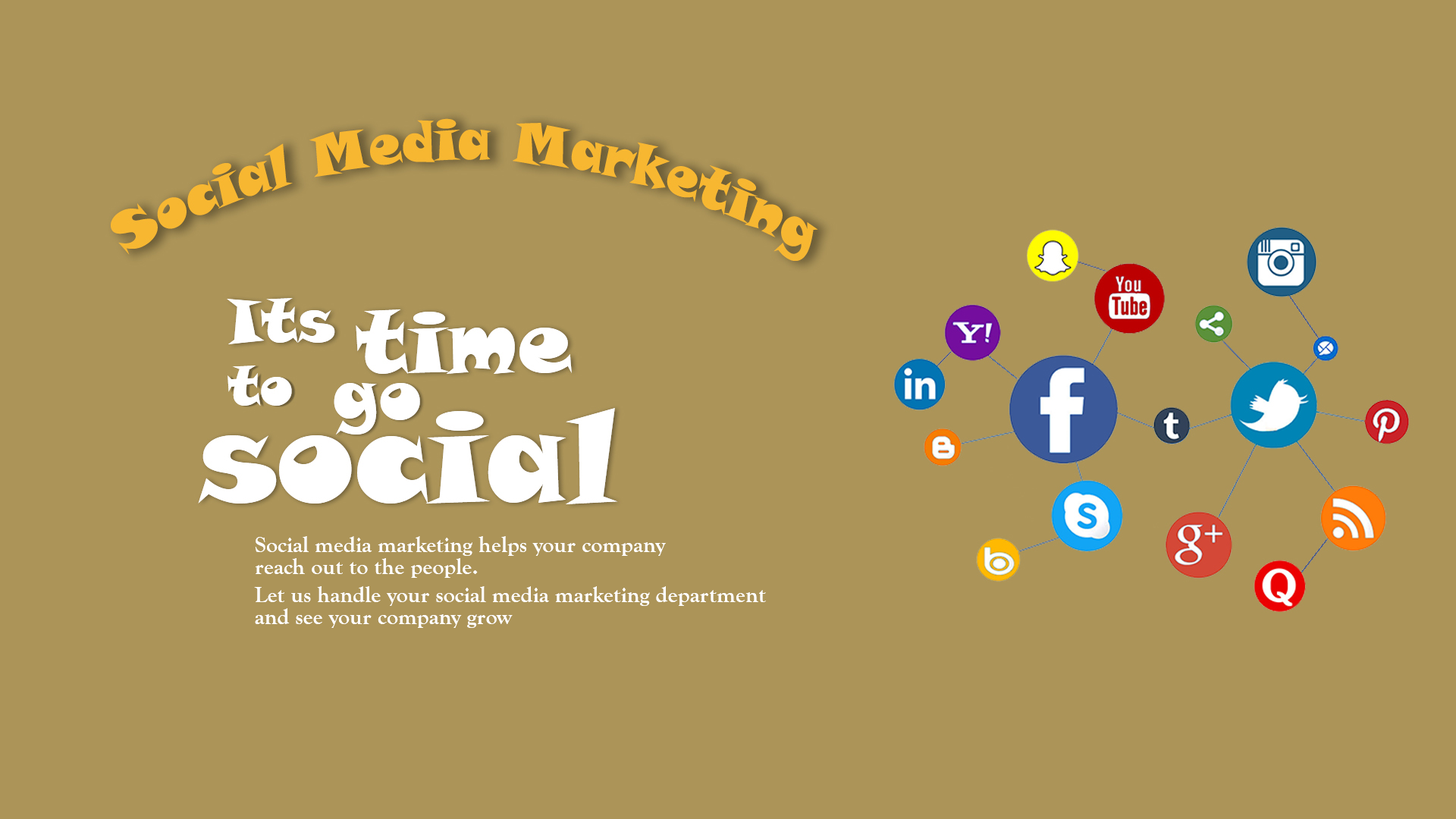
<style>
.page{position:relative;width:1456px;height:819px;background:#ac9458}
.page>*{position:absolute;margin:0}
.t1{font:22.7px/22px "GoudyOldStyleT-Bold";color:#ffffff}
</style>
<div class="page">
<p class="t1" style="left:255px;top:536px;width:411px;height:42px">Social media marketing helps your company <br>reach out to the people.</p>
<p class="t1" style="left:254px;top:586px;width:512px;height:42px">Let us handle your social media marketing department <br>and see your company grow</p>
</div>
